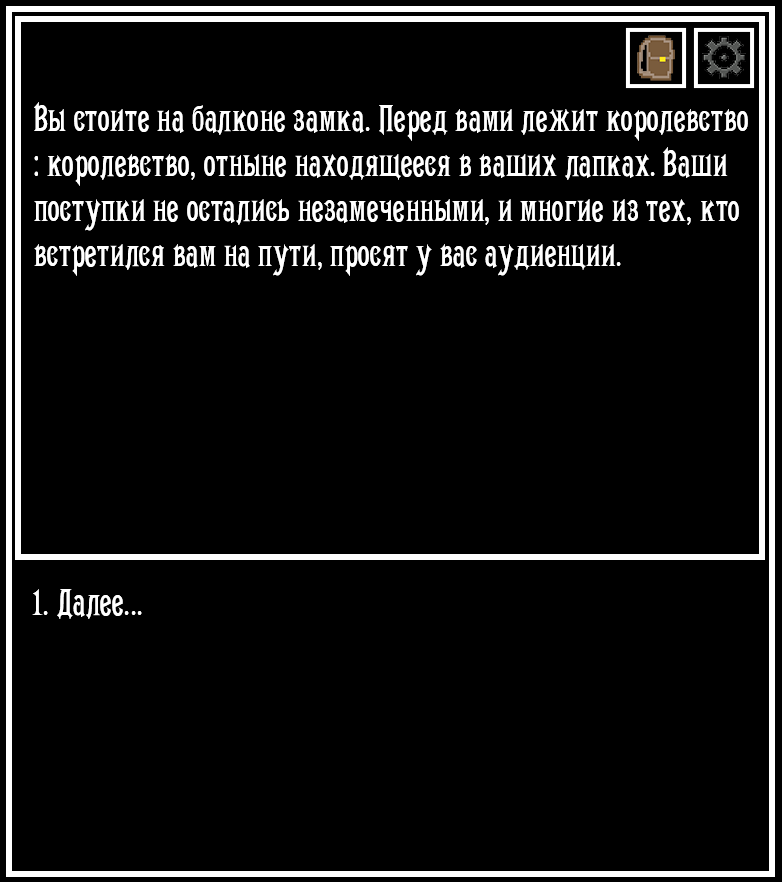
<style>
.page{position:relative;width:782px;height:882px;background:#000000}
.page>*{position:absolute;margin:0}
.t1{font:37.5px "Conkordia";color:#ffffff}
</style>
<div class="page">
<p class="t1" style="left:34px;top:102px;width:714px;height:174px">Вы стоите на балконе замка. Перед вами лежит королевство : королевство, отныне находящееся в ваших лапках. Ваши поступки не остались незамеченными, и многие из тех, кто встретился вам на пути, просят у вас аудиенции.</p>
<p class="t1" style="left:32px;top:589px;width:110px;height:30px">1. Далее...</p>
</div>
